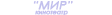
<style>
.page{position:relative;width:112px;height:15px;background:#ffffff}
.page>*{position:absolute;margin:0}
.t1{font:10.8px "CenturyGothic";color:#c2c0ed;font-weight:bold;font-style:italic;scale:1.11 1}
.t2{font:5.4px "CenturyGothic";color:#c2c0ed;font-weight:bold;font-style:italic;scale:1.11 1}
</style>
<div class="page">
<p class="t1" style="left:33px;top:1px;width:40px;height:9px">“МИР”</p>
<p class="t2" style="left:35px;top:10px;width:33px;height:6px">кинотеатр</p>
</div>
